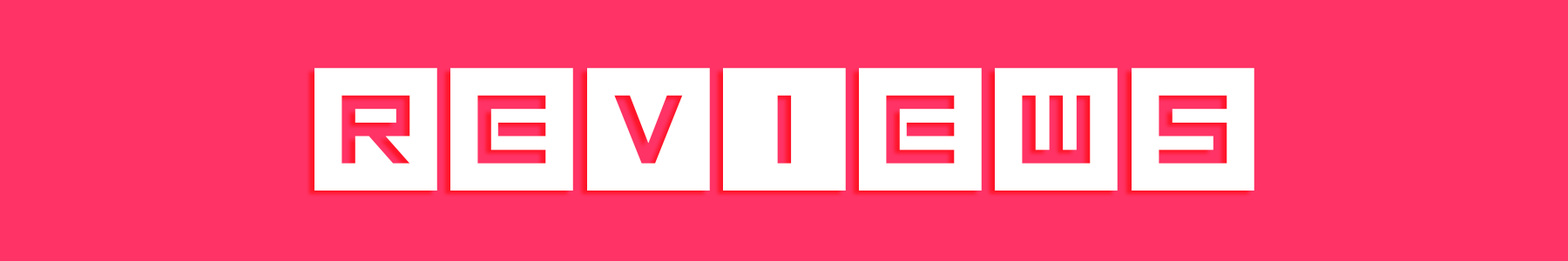
<style>
.page{position:relative;width:1568px;height:261px;background:#ff3366}
.page>*{position:absolute;margin:0}
.t1{font:217.8px "Inversionz";color:#ffffff}
</style>
<div class="page">
<p class="t1" style="left:314px;top:68px;width:940px;height:123px">reviews</p>
</div>
